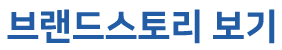
<style>
.page{position:relative;width:282px;height:50px;background:#ffffff}
.page>*{position:absolute;margin:0}
.t1{font:36px "NanumSquareEB";color:#225ca5}
</style>
<div class="page">
<p class="t1" style="left:7px;top:9px;width:268px;height:35px">브랜드스토리 보기</p>
</div>
